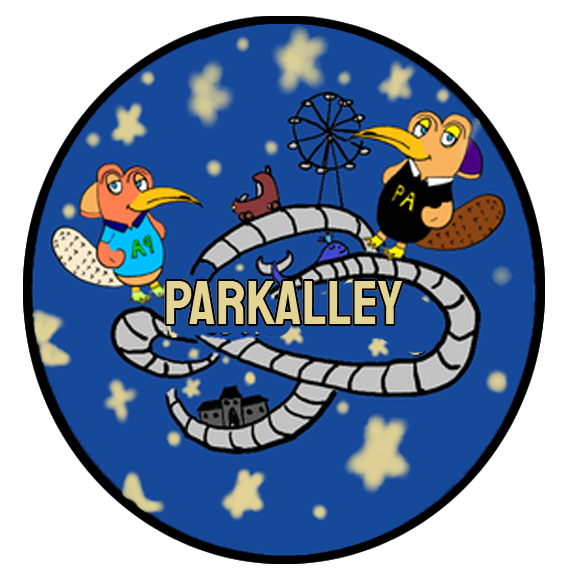
<style>
.page{position:relative;width:574px;height:572px;background:#ffffff}
.page>*{position:absolute;margin:0}
.t1{font:62.4px "Staatliches-Regular";color:#e4d494}
</style>
<div class="page">
<p class="t1" style="left:166px;top:281px;width:237px;height:43px">PARKALLEY</p>
</div>
